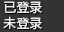
<style>
.page{position:relative;width:64px;height:32px;background:#333333}
.page>*{position:absolute;margin:0}
.t1{font:13px/16px "SourceHanSansSC-Regular";color:#e6e6e6}
</style>
<div class="page">
<p class="t1" style="left:3px;top:1px;width:39px;height:29px">已登录<br>未登录</p>
<p class="t1" style="left:3px;top:1px;width:39px;height:29px">已登录<br>未登录</p>
</div>
